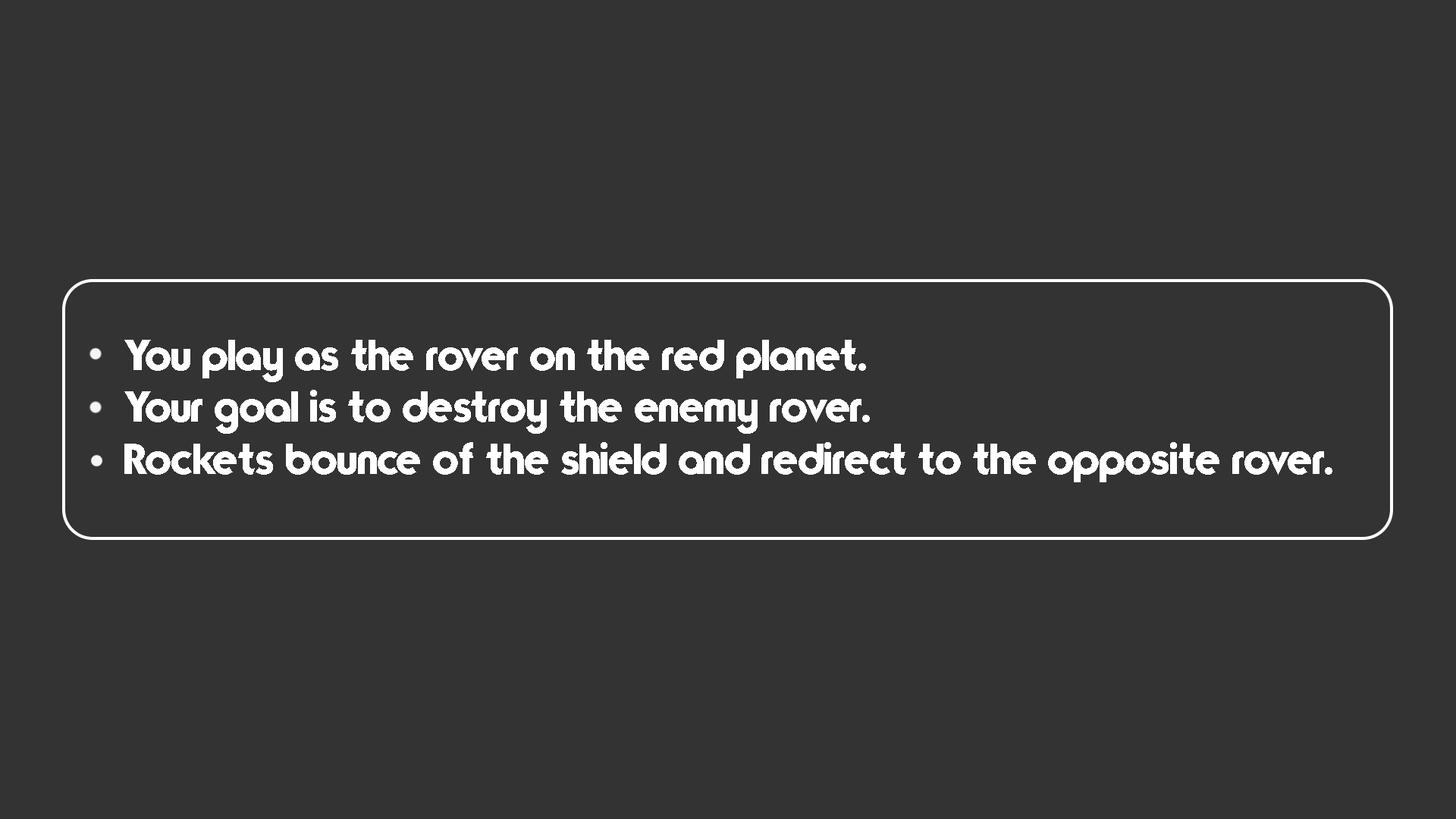
<style>
.page{position:relative;width:1456px;height:819px;background:#333333}
.page>*{position:absolute;margin:0}
.t1{font:43.3px "TypoGraphica";color:#ffffff}
</style>
<div class="page">
<p class="t1" style="left:124px;top:340px;width:1208px;height:142px">You  play  as  the  rover  on  the  red  planet. <br>Your  goal  is  to  destroy  the  enemy  rover.<br>Rockets  bounce  of  the  shield  and  redirect  to  the  opposite  rover.</p>
</div>
